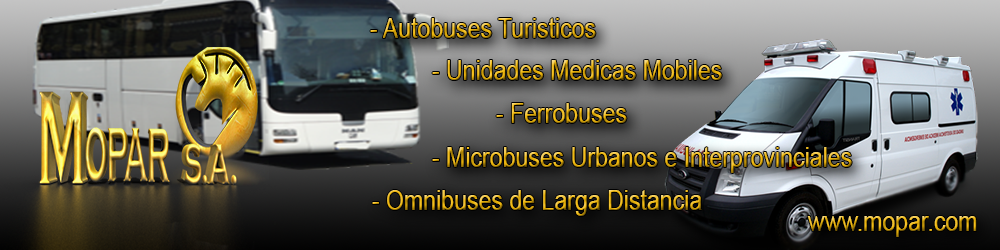
<style>
.page{position:relative;width:1000px;height:250px}
.page>*{position:absolute;margin:0}
.t1{font:28px "ArialMT";scale:0.83 1}
</style>
<div class="page">
<p class="t1" style="left:370px;top:18px;width:226px;height:20px">- Autobuses Turisticos</p>
<p class="t1" style="left:432px;top:60px;width:290px;height:20px">- Unidades Medicas Mobiles</p>
<p class="t1" style="left:496px;top:103px;width:131px;height:20px">- Ferrobuses</p>
<p class="t1" style="left:432px;top:147px;width:420px;height:26px">- Microbuses Urbanos e Interprovinciales</p>
<p class="t1" style="left:372px;top:190px;width:330px;height:26px">- Omnibuses de Larga Distancia</p>
<p class="t1" style="left:807px;top:216px;width:170px;height:21px">www.mopar.com</p>
</div>
